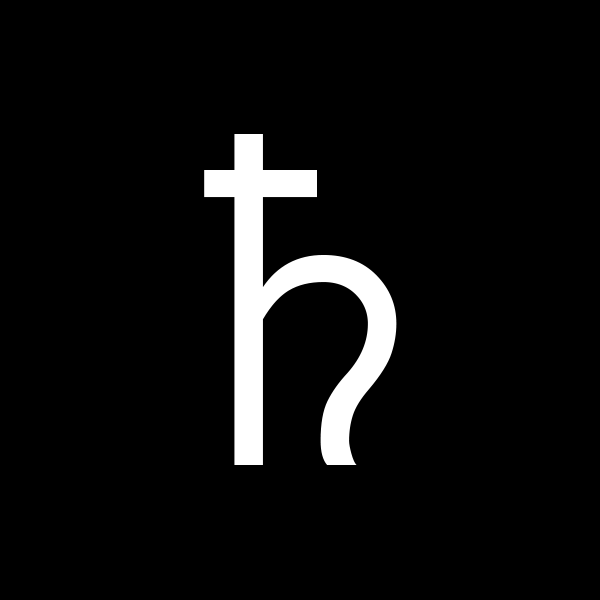
<style>
.page{position:relative;width:600px;height:600px;background:#000000}
.page>*{position:absolute;margin:0}
.t1{font:473.1px "ArialUnicodeMS";color:#ffffff}
</style>
<div class="page">
<p class="t1" style="left:204px;top:134px;width:193px;height:331px">♄</p>
</div>
